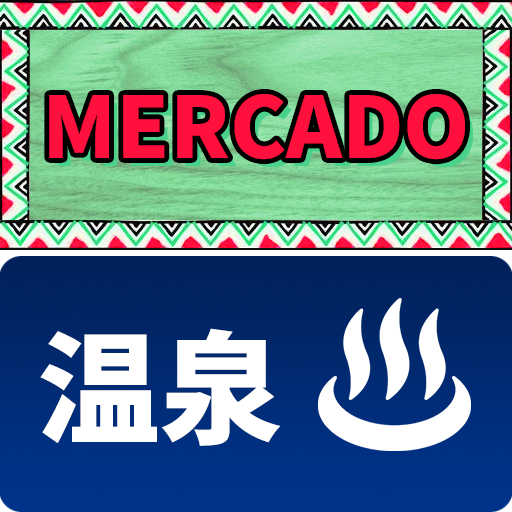
<style>
.page{position:relative;width:512px;height:512px}
.page>*{position:absolute;margin:0}
.t1{font:84.6px "Keifont";color:#ff103d}
.t2{font:121.8px "Keifont";color:#ffffff}
</style>
<div class="page">
<p class="t1" style="left:49px;top:94px;width:416px;height:66px">MERCADO</p>
<p class="t2" style="left:40px;top:328px;width:241px;height:118px">温泉</p>
</div>
